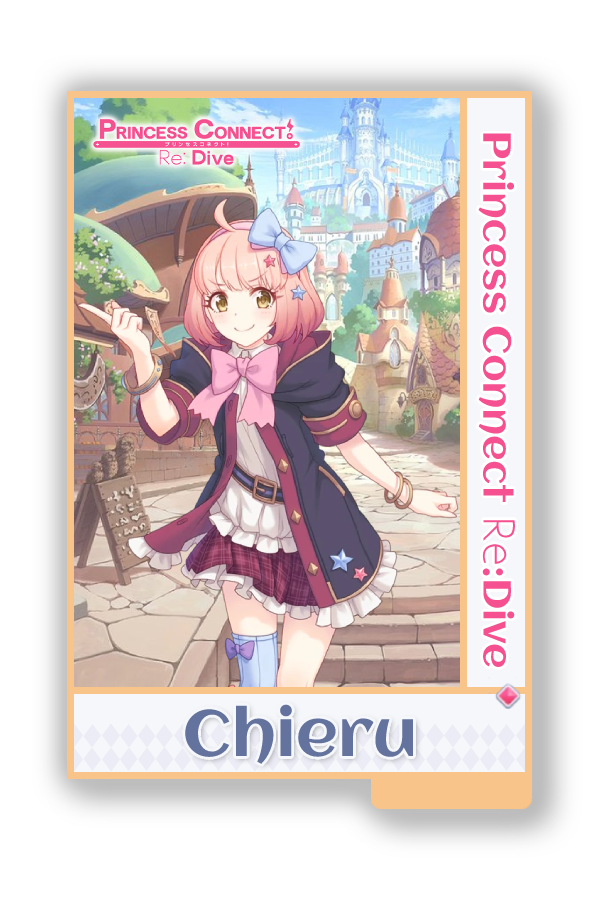
<style>
.page{position:relative;width:600px;height:900px;background:#ffffff}
.page>*{position:absolute;margin:0}
.t1{font:39px "Aclonica-Regular";color:#f55191}
.t2{font:39px "AaarghNormal";color:#f55191}
.t3{font:65px "Aclonica-Regular";color:#64739d}
</style>
<div class="page">
<p class="t1" style="left:478px;top:133px;width:38px;height:534px;rotate:90deg">Princess Connect <span class="t2">Re</span>:Dive</p>
<p class="t3" style="left:185px;top:704px;width:228px;height:60px">Chieru</p>
</div>
